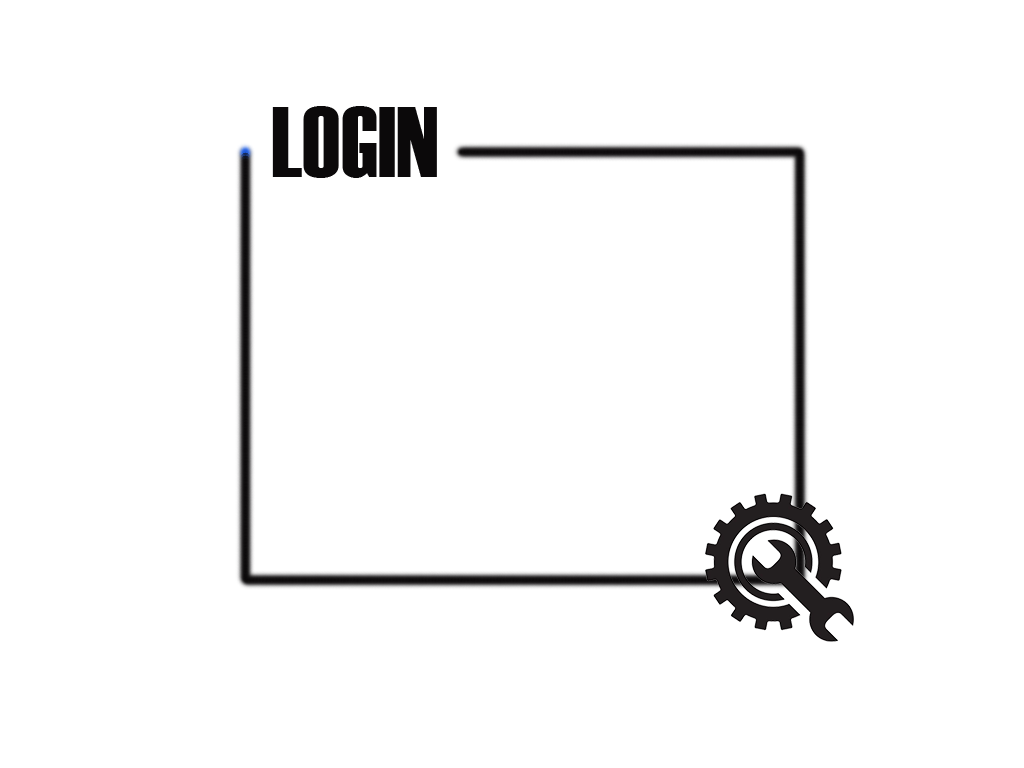
<style>
.page{position:relative;width:1024px;height:768px;background:#ffffff}
.page>*{position:absolute;margin:0}
.t1{font:100px "Haettenschweiler";color:#0b090a}
</style>
<div class="page">
<p class="t1" style="left:272px;top:106px;width:165px;height:72px">LOGIN</p>
</div>
